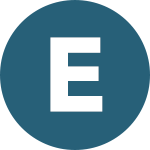
<style>
.page{position:relative;width:150px;height:150px;background:#276078}
.page>*{position:absolute;margin:0}
.t1{font:104.1px "AvenirNext-Bold";letter-spacing:-0.01em;color:#ffffff;font-variant:small-caps}
</style>
<div class="page">
<p class="t1" style="left:50px;top:37px;width:53px;height:75px">E</p>
</div>
